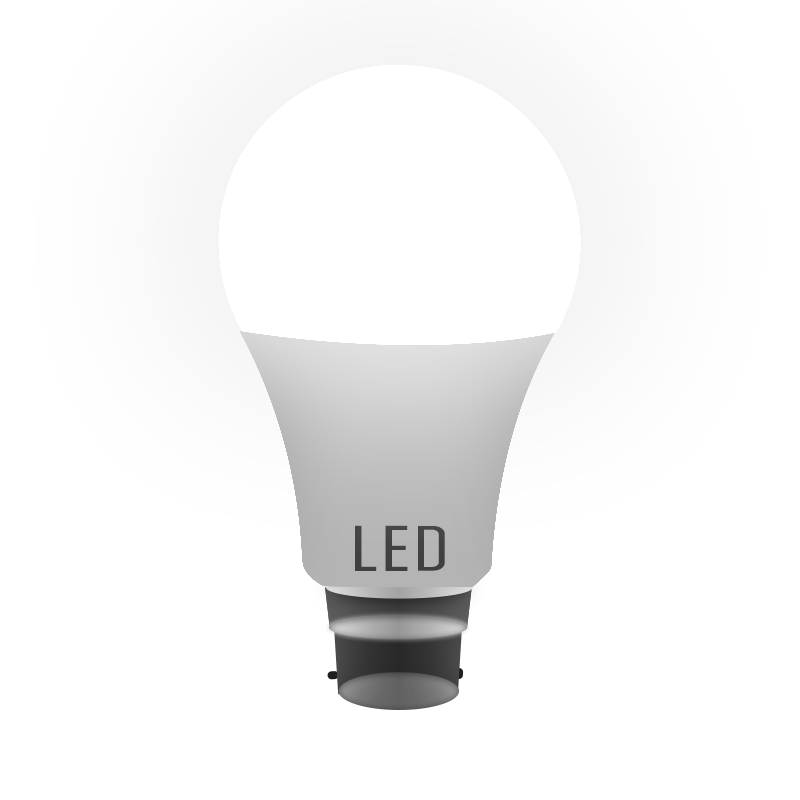
<style>
.page{position:relative;width:800px;height:800px;background:#ffffff}
.page>*{position:absolute;margin:0}
.t1{font:58.3px "AgencyFB-Reg";color:#403f3f;font-weight:bold;scale:1.44 1}
</style>
<div class="page">
<p class="t1" style="left:355px;top:525px;width:90px;height:46px">LED</p>
</div>
